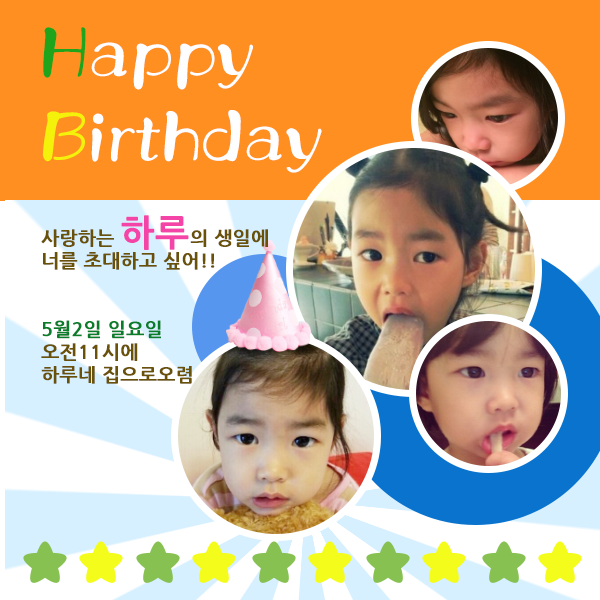
<style>
.page{position:relative;width:600px;height:600px;background:#ff8f21}
.page>*{position:absolute;margin:0}
.t1{font:70px "Yj-DOOLGI-Medium";color:#fefefe}
.t2{font:70px "Yj-DOOLGI-Medium";color:#1fa41c}
.t3{font:70px "Yj-DOOLGI-Medium";color:#f4f10b}
.t4{font:19px "NanumGothicBold";color:#695107;font-weight:bold}
.t5{font:36px "NanumGothicBold";color:#f544a8;font-weight:bold}
.t6{font:19px "NanumGothicBold";color:#097d2a;font-weight:bold}
</style>
<div class="page">
<p class="t1" style="left:42px;top:27px;width:280px;height:146px"><span class="t2">H</span>appy<br><span class="t3">B</span>irthday</p>
<p class="t4" style="left:41px;top:215px;width:227px;height:169px">사랑하는 <span class="t5">하루</span>의 생일에<br>너를 초대하고 싶어!!<br><br><br><span class="t6">5월2일 일요일<br></span>오전11시에<br>하루네 집으로오렴</p>
</div>
